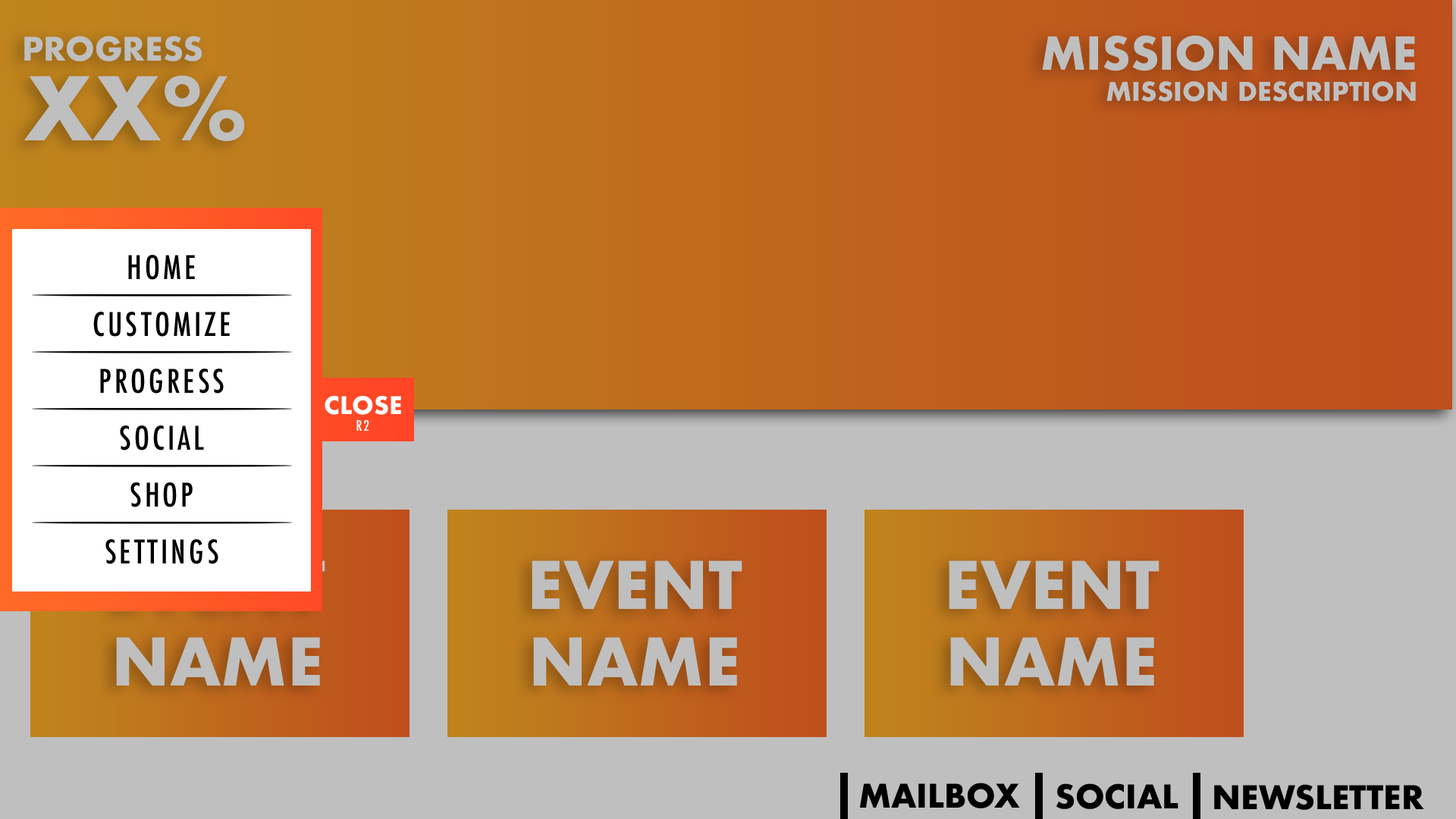
<style>
.page{position:relative;width:1456px;height:819px;background:#bfbfbf}
.page>*{position:absolute;margin:0}
.t1{font:31.6px "Futura-Bold";color:#bfbfbf}
.t2{font:44.2px "Futura-Bold";color:#bfbfbf}
.t3{font:85.2px "Futura-Bold";color:#bfbfbf}
.t4{font:25.3px "Futura-Bold";color:#bfbfbf}
.t5{font:31.6px "Futura-CondensedMedium";letter-spacing:0.1em;color:#000000}
.t6{font:23.6px "Futura-Bold";color:#ffffff}
.t7{font:14.1px "Futura-CondensedMedium";letter-spacing:0.1em;color:#ffffff}
.t8{font:63.9px "Futura-Bold"}
.t9{font:63.9px "Futura-Bold";color:#bfbfbf}
.t10{font:31.6px "Futura-Bold";color:#000000}
</style>
<div class="page">
<p class="t1" style="left:24px;top:36px;width:178px;height:25px">PROGRESS</p>
<p class="t2" style="left:1042px;top:35px;width:373px;height:36px">MISSION NAME</p>
<p class="t3" style="left:24px;top:75px;width:221px;height:67px">XX%</p>
<p class="t4" style="left:1106px;top:81px;width:310px;height:21px">MISSION DESCRIPTION</p>
<p class="t5" style="left:128px;top:255px;width:67px;height:25px">HOME</p>
<p class="t5" style="left:93px;top:312px;width:137px;height:25px">CUSTOMIZE</p>
<p class="t5" style="left:100px;top:369px;width:124px;height:25px">PROGRESS</p>
<p class="t6" style="left:325px;top:396px;width:76px;height:19px">CLOSE</p>
<p class="t5" style="left:120px;top:425px;width:84px;height:25px">SOCIAL</p>
<p class="t7" style="left:356px;top:419px;width:13px;height:12px">R2</p>
<p class="t5" style="left:130px;top:482px;width:63px;height:25px">SHOP</p>
<p class="t5" style="left:105px;top:539px;width:113px;height:25px">SETTINGS</p>
<p class="t8" style="left:115px;top:560px;width:210px;height:126px;text-align:center">EVENT<br>NAME</p>
<p class="t9" style="left:532px;top:560px;width:210px;height:126px;text-align:center">EVENT<br>NAME</p>
<p class="t9" style="left:949px;top:560px;width:210px;height:126px;text-align:center">EVENT<br>NAME</p>
<p class="t10" style="left:860px;top:783px;width:160px;height:25px">MAILBOX</p>
<p class="t10" style="left:1056px;top:783px;width:122px;height:26px">SOCIAL</p>
<p class="t10" style="left:1214px;top:784px;width:210px;height:26px">NEWSLETTER</p>
</div>
